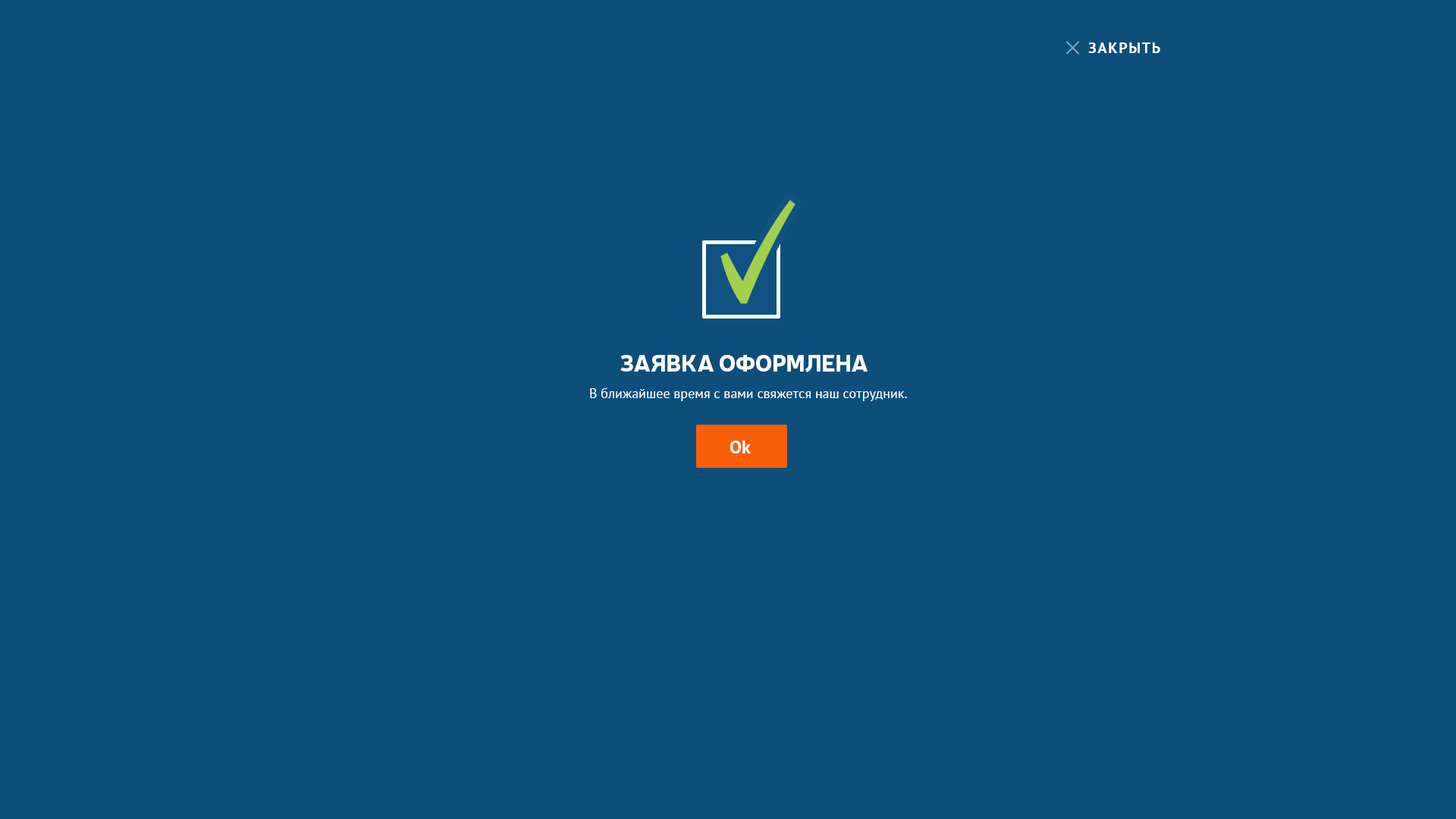
<style>
.page{position:relative;width:1456px;height:819px;background:#0d4e7b}
.page>*{position:absolute;margin:0}
.t1{font:15.2px "PTSans-Bold";color:#ffffff;text-transform:uppercase}
.t2{font:22.7px "Neris-Black";color:#ffffff;text-transform:uppercase}
.t3{font:13.6px "PTSans-Regular";color:#ffffff}
.t4{font:18.2px "PTSans-Bold";color:#ffffff}
</style>
<div class="page">
<p class="t1" style="left:1088px;top:42px;width:72px;height:11px">Закрыть</p>
<p class="t1" style="left:1088px;top:42px;width:72px;height:11px">Закрыть</p>
<p class="t1" style="left:1088px;top:42px;width:72px;height:11px">Закрыть</p>
<p class="t2" style="left:620px;top:355px;width:248px;height:17px">Заявка оформлена</p>
<p class="t3" style="left:590px;top:388px;width:317px;height:13px">В ближайшее время с вами свяжется наш сотрудник.</p>
<p class="t4" style="left:730px;top:441px;width:21px;height:12px">Ok</p>
</div>
